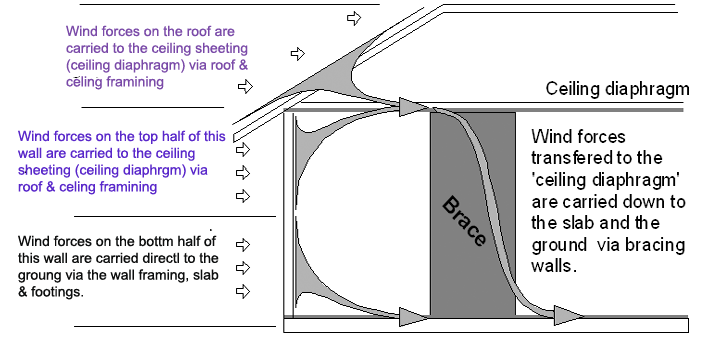
<style>
.page{position:relative;width:702px;height:337px;background:#ffffff}
.page>*{position:absolute;margin:0}
.t1{font:14px "ArialMT";color:#7a4aa8}
.t2{font:14px "ArialMT";color:#5927ca}
.t3{font:14px "ArialMT";color:#0c0d0d}
</style>
<div class="page">
<p class="t1" style="left:66px;top:25px;width:182px;height:65px">Wind forces on the roof are<br>carried to the ceiling sheeting<br>(ceiling diaphragm) via roof &amp;<br>celing framining</p>
<p class="t2" style="left:18px;top:130px;width:208px;height:65px">Wind forces on the top half of this<br>wall are carried to the ceiling <br>sheeting (ceiling diaphrgm) via <br>roof &amp; celing framining</p>
<p class="t3" style="left:18px;top:235px;width:201px;height:65px">Wind forces on the bottm half of <br>this wall are carried directl to the <br>groung via the wall framing, slab<br>&amp; footings.</p>
</div>
